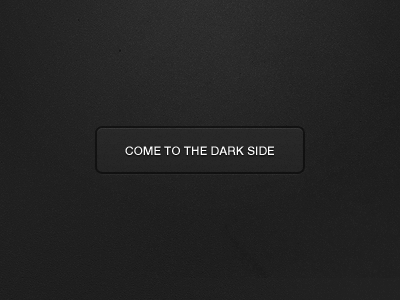
<style>
.page{position:relative;width:400px;height:300px}
.page>*{position:absolute;margin:0}
.t1{font:12px "HelveticaNeue-Medium";color:#ffffff;text-transform:uppercase}
</style>
<div class="page">
<p class="t1" style="left:125px;top:146px;width:149px;height:9px">come to the dark side</p>
</div>
